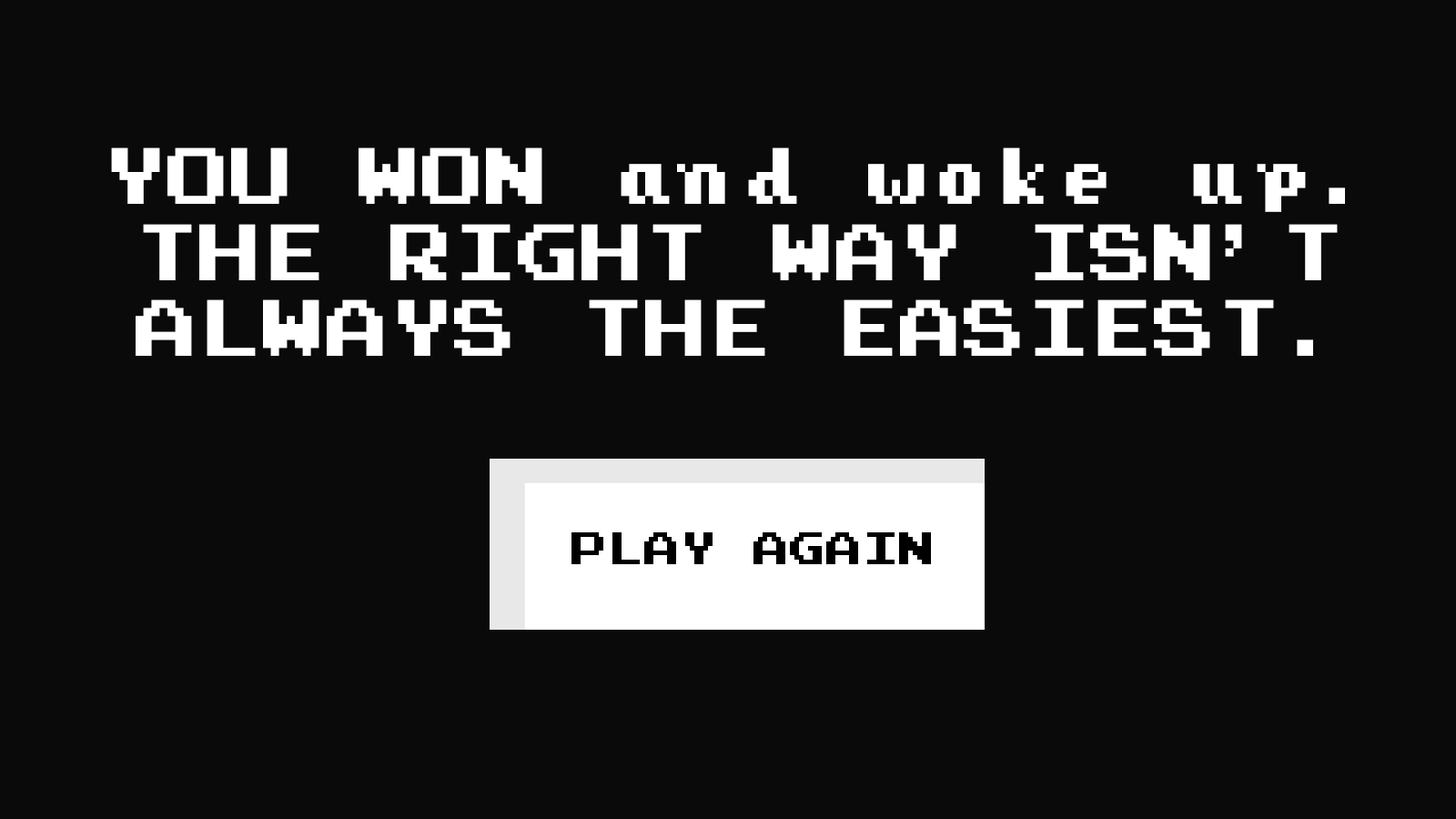
<style>
.page{position:relative;width:1456px;height:819px;background:#0a0a0a}
.page>*{position:absolute;margin:0}
.t1{font:63.7px "PressStartReg";color:#ffffff}
.t2{font:36.4px "PressStartReg";color:#000000}
</style>
<div class="page">
<p class="t1" style="left:111px;top:147px;width:1234px;height:209px;text-align:center">YOU WON and woke up.<br>THE RIGHT WAY ISN’T ALWAYS THE EASIEST.</p>
<p class="t2" style="left:571px;top:532px;width:360px;height:32px">PLAY AGAIN</p>
</div>
